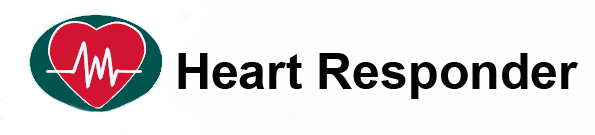
<style>
.page{position:relative;width:595px;height:135px;background:#fffefe}
.page>*{position:absolute;margin:0}
.t1{font:50px "Arial-BoldMT";color:#040404}
</style>
<div class="page">
<p class="t1" style="left:178px;top:53px;width:400px;height:46px">Heart Responder</p>
</div>
